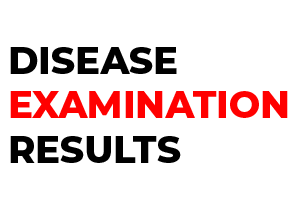
<style>
.page{position:relative;width:300px;height:200px;background:#ffffff}
.page>*{position:absolute;margin:0}
.t1{font:37px "Montserrat-ExtraBold";color:#ff0000}
.t2{font:37px "Montserrat-ExtraBold";color:#000000}
</style>
<div class="page">
<p class="t1" style="left:10px;top:47px;width:278px;height:116px"><span class="t2">DISEASE </span>EXAMINATION <span class="t2">RESULTS</span></p>
</div>
